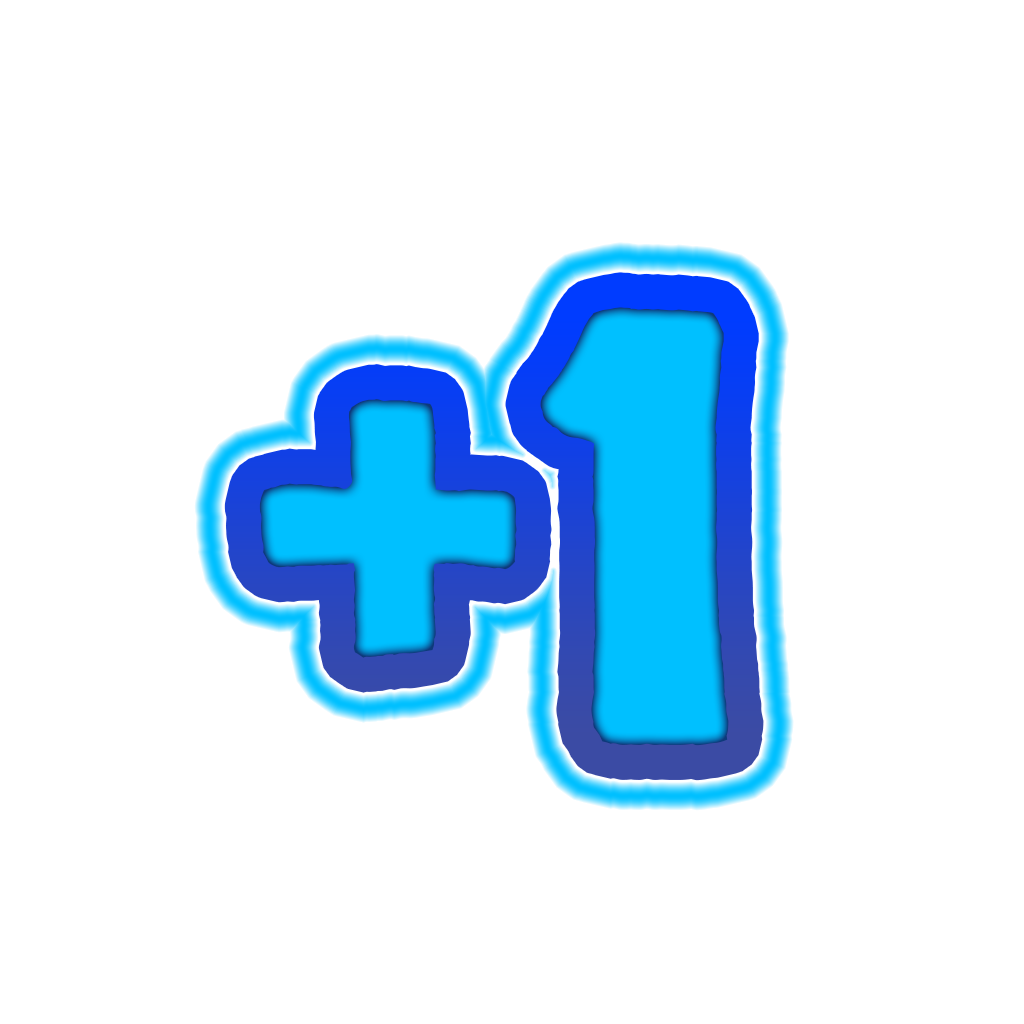
<style>
.page{position:relative;width:1024px;height:1024px;background:#ffffff}
.page>*{position:absolute;margin:0}
.t1{font:600px "Skranji-Bold";color:#00c0ff}
</style>
<div class="page">
<p class="t1" style="left:259px;top:307px;width:470px;height:439px">+1</p>
</div>
